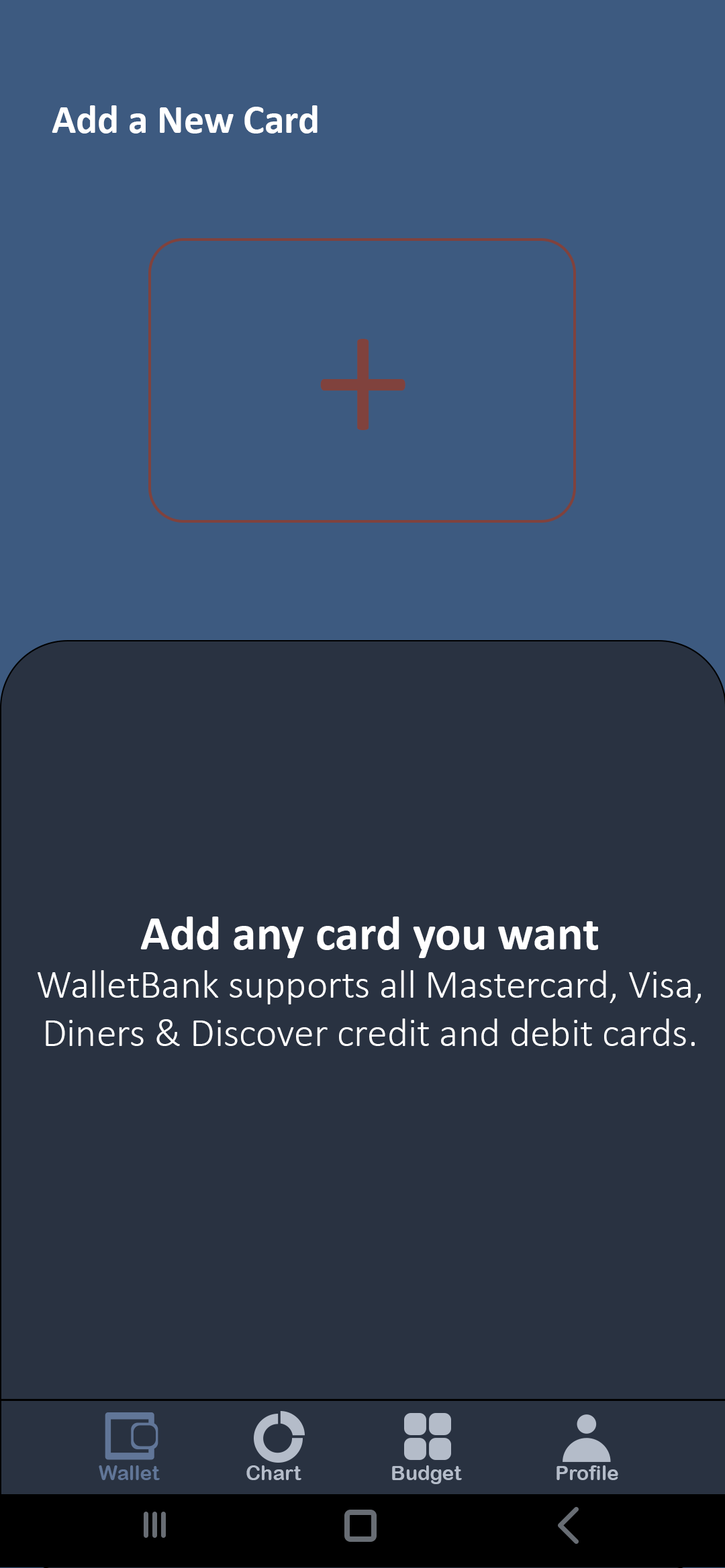
<style>
.page{position:relative;width:725px;height:1568px;background:#293241}
.page>*{position:absolute;margin:0}
.t1{font:40.3px "Calibri-Bold";color:#ffffff}
.t2{font:201.3px "Calibri-Light";color:#80423d}
.t3{font:40.3px "Calibri-Light";color:#ffffff}
.t4{font:48.3px "Calibri-Bold";color:#ffffff}
.t5{font:20.1px "ArialRoundedMTBold";color:#617698}
.t6{font:20.1px "ArialRoundedMTBold";color:#b4bcc9}
</style>
<div class="page">
<p class="t1" style="left:52px;top:105px;width:265px;height:29px">Add a New Card</p>
<p class="t2" style="left:320px;top:339px;width:85px;height:91px">+</p>
<p class="t3" style="left:38px;top:917px;width:662px;height:129px;text-align:center"><span class="t4">Add any card you want <br></span>WalletBank supports all Mastercard, Visa, Diners &amp; Discover credit and debit cards.</p>
<p class="t5" style="left:99px;top:1465px;width:61px;height:15px">Wallet</p>
<p class="t6" style="left:246px;top:1465px;width:55px;height:15px">Chart</p>
<p class="t6" style="left:392px;top:1465px;width:70px;height:19px">Budget</p>
<p class="t6" style="left:556px;top:1465px;width:62px;height:15px">Profile</p>
</div>
